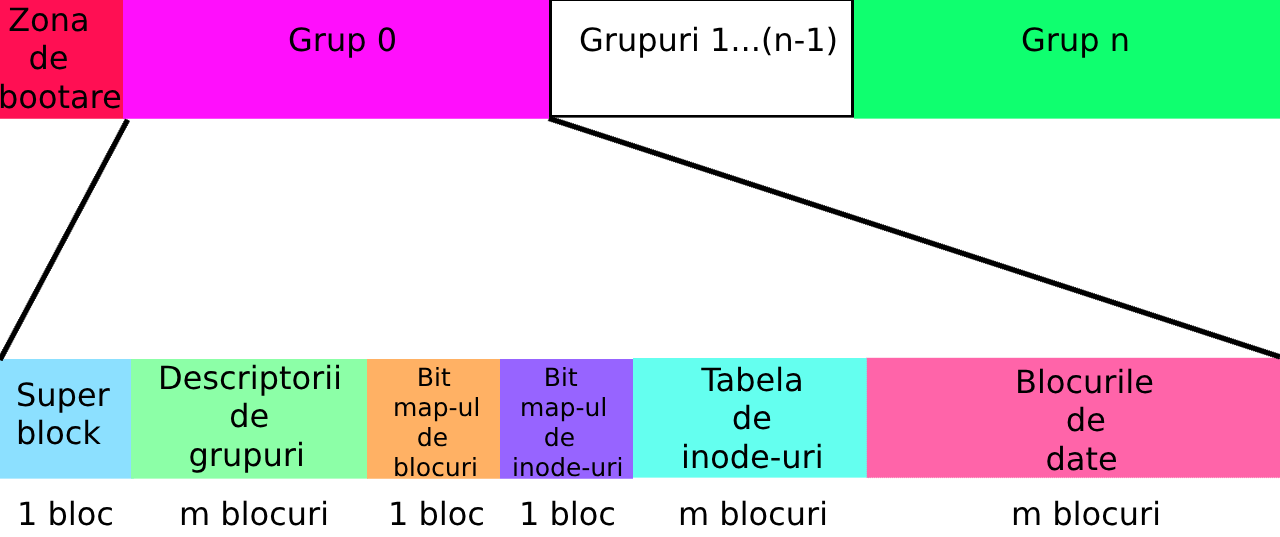
<style>
.page{position:relative;width:1280px;height:537px;background:#ffffff}
.page>*{position:absolute;margin:0}
.t1{font:32px "DejaVuSans";color:#000000}
.t2{font:25px "DejaVuSans";color:#000000}
</style>
<div class="page">
<p class="t1" style="left:0px;top:7px;width:121px;height:102px">Zona <br>   de<br>bootare</p>
<p class="t1" style="left:289px;top:27px;width:106px;height:31px">Grup 0</p>
<p class="t1" style="left:580px;top:26px;width:256px;height:32px">Grupuri 1...(n-1)</p>
<p class="t1" style="left:1022px;top:27px;width:106px;height:31px">Grup n</p>
<p class="t1" style="left:161px;top:364px;width:179px;height:109px">Descriptorii<br>       de<br>   grupuri</p>
<p class="t1" style="left:684px;top:366px;width:137px;height:103px">Tabela <br>     de <br>inode-uri</p>
<p class="t2" style="left:395px;top:367px;width:84px;height:110px">Bit<br>map-ul<br>   de<br>blocuri</p>
<p class="t2" style="left:514px;top:367px;width:108px;height:110px">Bit<br> map-ul<br>    de<br>inode-uri</p>
<p class="t1" style="left:1018px;top:368px;width:135px;height:103px">Blocurile<br>     de<br>   date</p>
<p class="t1" style="left:18px;top:382px;width:92px;height:63px">Super<br>block</p>
<p class="t1" style="left:20px;top:500px;width:92px;height:26px">1 bloc</p>
<p class="t1" style="left:181px;top:500px;width:146px;height:26px">m blocuri</p>
<p class="t1" style="left:391px;top:500px;width:92px;height:26px">1 bloc</p>
<p class="t1" style="left:522px;top:500px;width:92px;height:26px">1 bloc</p>
<p class="t1" style="left:680px;top:500px;width:146px;height:26px">m blocuri</p>
<p class="t1" style="left:1013px;top:500px;width:146px;height:26px">m blocuri</p>
</div>
